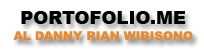
<style>
.page{position:relative;width:204px;height:53px;background:#ffffff}
.page>*{position:absolute;margin:0}
.t1{font:18px "Arial-Black";color:#000000}
.t2{font:12px "Arial-Black";color:#e08c3a}
</style>
<div class="page">
<p class="t1" style="left:21px;top:11px;width:165px;height:13px">PORTOFOLIO.ME</p>
<p class="t2" style="left:13px;top:31px;width:180px;height:10px">AL DANNY RIAN WIBISONO</p>
</div>
